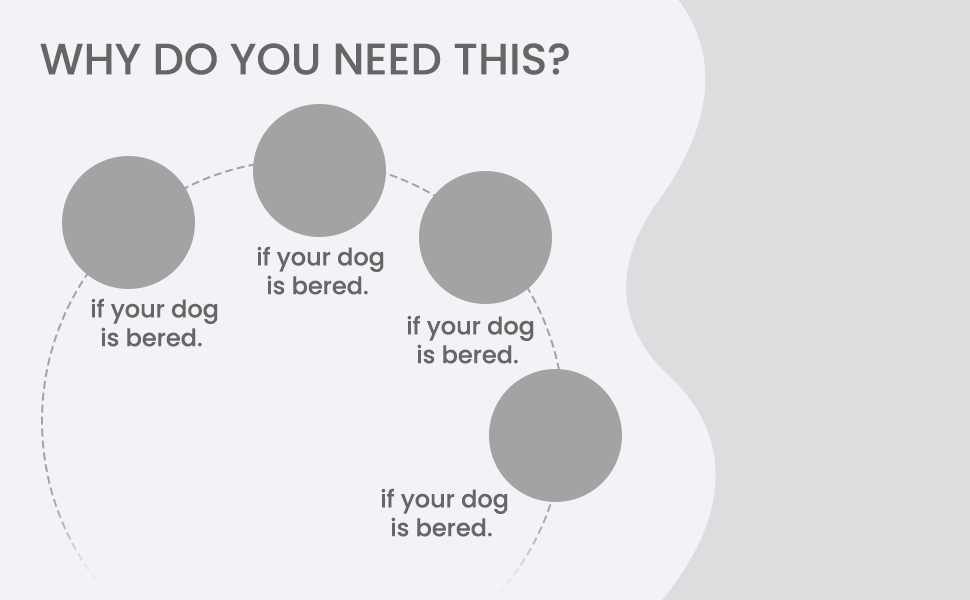
<style>
.page{position:relative;width:970px;height:600px;background:#f2f3f6}
.page>*{position:absolute;margin:0}
.t1{font:44px "Poppins-Medium";color:#666666}
.t2{font:24px "Poppins-Medium";color:#666666}
</style>
<div class="page">
<p class="t1" style="left:40px;top:43px;width:529px;height:32px">WHY DO YOU NEED THIS?</p>
<p class="t2" style="left:257px;top:246px;width:127px;height:49px;text-align:center">if your dog<br>is bered.</p>
<p class="t2" style="left:91px;top:298px;width:127px;height:49px;text-align:center">if your dog<br>is bered.</p>
<p class="t2" style="left:407px;top:315px;width:127px;height:49px;text-align:center">if your dog<br>is bered.</p>
<p class="t2" style="left:381px;top:488px;width:127px;height:49px;text-align:center">if your dog<br>is bered.</p>
</div>
